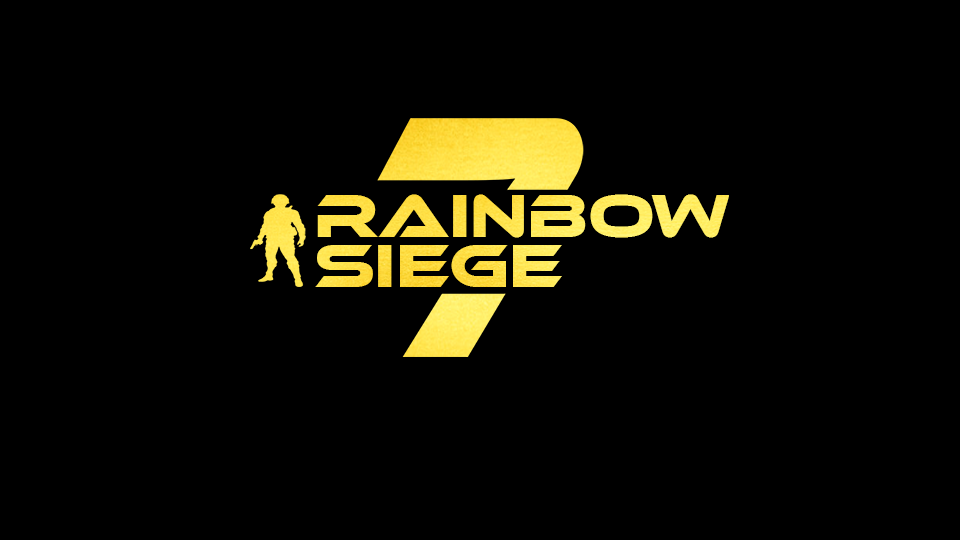
<style>
.page{position:relative;width:960px;height:540px;background:#000000}
.page>*{position:absolute;margin:0}
.t1{font:62.5px/50px "EthnocentricRg-Regular";color:#ffe34c}
</style>
<div class="page">
<p class="t1" style="left:315px;top:194px;width:415px;height:93px">RAINBOW <br>SIEGE</p>
</div>
